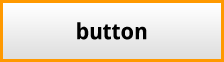
<style>
.page{position:relative;width:224px;height:62px}
.page>*{position:absolute;margin:0}
.t1{font:22.5px "DroidSans-Bold";color:#000000}
</style>
<div class="page">
<p class="t1" style="left:77px;top:22px;width:70px;height:18px">button</p>
</div>
